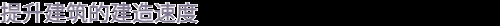
<style>
.page{position:relative;width:500px;height:26px;background:#000000}
.page>*{position:absolute;margin:0}
.t1{font:22px "WebPSD-18463539-0-Regular";color:#837a91;font-weight:bold}
</style>
<div class="page">
<p class="t1" style="left:0px;top:0px;width:500px;height:26px">提升建筑的建造速度</p>
</div>
